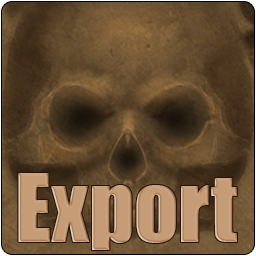
<style>
.page{position:relative;width:256px;height:256px}
.page>*{position:absolute;margin:0}
.t1{font:86.7px "Impact";color:#c39770}
</style>
<div class="page">
<p class="t1" style="left:18px;top:173px;width:219px;height:77px">Export</p>
</div>
